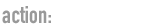
<style>
.page{position:relative;width:145px;height:28px;background:#ffffff}
.page>*{position:absolute;margin:0}
.t1{font:24px "DINEngschrift-Alternate";color:#999999}
</style>
<div class="page">
<p class="t1" style="left:2px;top:6px;width:49px;height:18px">action:</p>
</div>
